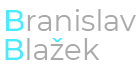
<style>
.page{position:relative;width:140px;height:75px;background:#ffffff}
.page>*{position:absolute;margin:0}
.t1{font:29.2px "Montserrat-Regular";color:#aaaaaa}
.t2{font:29.2px "Montserrat-Medium";color:#49ecff}
</style>
<div class="page">
<p class="t1" style="left:6px;top:9px;width:130px;height:22px"><span class="t2">B</span>ranislav</p>
<p class="t1" style="left:5px;top:38px;width:95px;height:22px"><span class="t2">B</span>lazek</p>
<p class="t2" style="left:52px;top:38px;width:11px;height:4px">ˇ</p>
</div>
